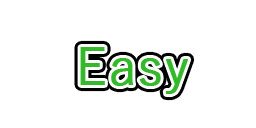
<style>
.page{position:relative;width:256px;height:128px;background:#ffffff}
.page>*{position:absolute;margin:0}
.t1{font:50px "YuGothic-Regular";color:#33b929;font-weight:bold}
</style>
<div class="page">
<p class="t1" style="left:80px;top:47px;width:108px;height:47px">Easy</p>
</div>
